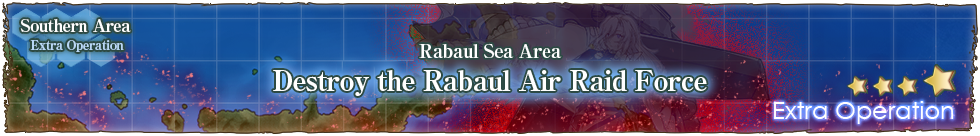
<style>
.page{position:relative;width:980px;height:136px}
.page>*{position:absolute;margin:0}
.t1{font:13px/22px "RyuminPro-ExBold";letter-spacing:-0.04em;color:#b9d7f5}
.t2{font:17px/22px "RyuminPro-ExBold";letter-spacing:-0.04em;color:#ffffff}
.t3{font:19px "RyuminPro-ExBold";letter-spacing:-0.04em;color:#ffffff}
.t4{font:28px "RyuminPro-ExBold";letter-spacing:-0.04em;color:#ffffff}
</style>
<div class="page">
<p class="t1" style="left:20px;top:19px;width:111px;height:33px"><span class="t2">Southern Area<br>　  </span>Extra Operation</p>
<p class="t3" style="left:419px;top:43px;width:143px;height:15px">Rabaul Sea Area</p>
<p class="t4" style="left:273px;top:70px;width:434px;height:26px">Destroy the Rabaul Air Raid Force</p>
</div>
